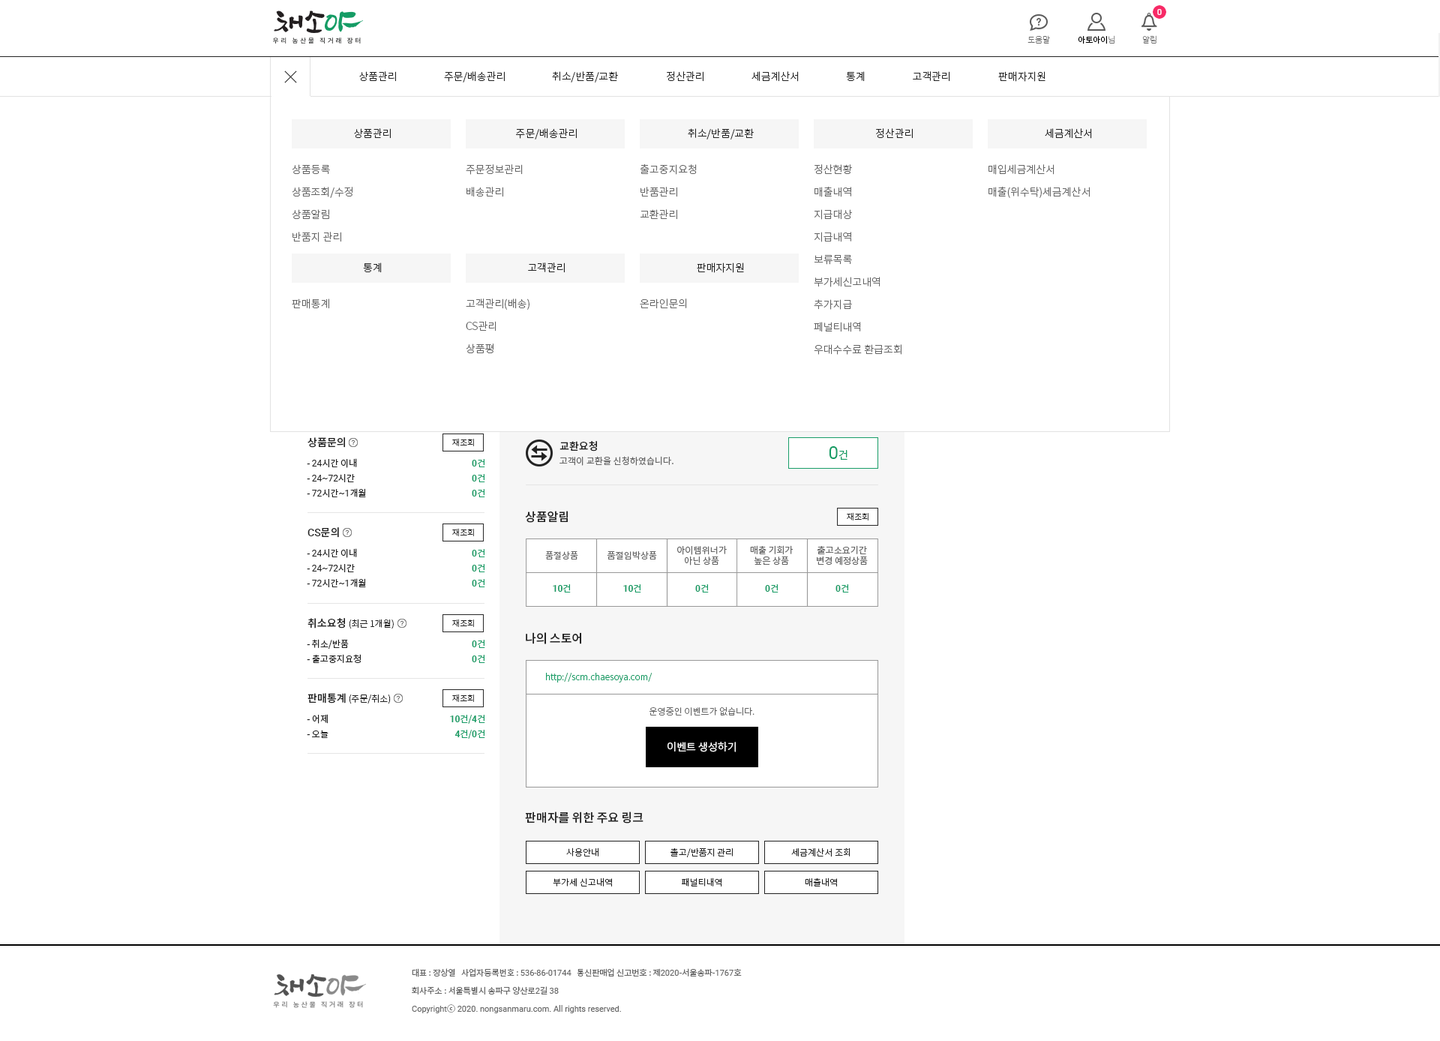
<style>
.page{position:relative;width:1440px;height:1041px;background:#ffffff}
.page>*{position:absolute;margin:0}
.t1{font:8.2px "NotoSansCJKkr-Thin";color:#666666}
.t2{font:8.2px "NotoSansCJKkr-Regular";color:#000000}
.t3{font:10.5px "NotoSansCJKkr-Light";color:#222222}
.t4{font:10.5px/22.5px "NotoSansCJKkr-Light";color:#666666}
.t5{font:10.5px "NotoSansCJKkr-Light";color:#666666}
.t6{font:10.5px "NotoSansCJKkr-Medium";color:#222222}
.t7{font:8.2px "NotoSansCJKkr-Light";color:#222222}
.t8{font:18px "Roboto-Regular";color:#159c65}
.t9{font:10.5px "NotoSansCJKkr-DemiLight";color:#159c65}
.t10{font:9px/15px "NotoSansCJKkr-Regular";color:#222222}
.t11{font:9px/15px "Roboto-Regular";color:#222222}
.t12{font:9px/15px "Roboto-Bold";color:#159c65}
.t13{font:9px/15px "NotoSansCJKkr-Regular";color:#159c65}
.t14{font:9px "NotoSansCJKkr-Regular";color:#666666}
.t15{font:12px "NotoSansCJKkr-Medium";color:#222222}
.t16{font:10.5px "Roboto-Medium";color:#222222}
.t17{font:9px "Roboto-Bold";color:#159c65}
.t18{font:9px "NotoSansCJKkr-Regular";color:#159c65}
.t19{font:9px "NotoSansCJKkr-Light";color:#222222}
.t20{font:9px "NotoSansCJKkr-Light";color:#159c65}
.t21{font:9px "NotoSansCJKkr-Light";color:#666666}
.t22{font:10.5px "NotoSansCJKkr-DemiLight";color:#ffffff}
.t23{font:8.2px/18px "Roboto-Regular";color:#666666}
.t24{font:8.2px/18px "NotoSansCJKkr-Regular";color:#666666}
</style>
<div class="page">
<p class="t1" style="left:1028px;top:35px;width:22px;height:9px">도움말</p>
<p class="t2" style="left:1078px;top:35px;width:37px;height:9px">아토아이<span class="t1">님</span></p>
<p class="t1" style="left:1142px;top:35px;width:14px;height:9px">알림</p>
<p class="t3" style="left:359px;top:71px;width:37px;height:11px">상품관리</p>
<p class="t3" style="left:444px;top:71px;width:61px;height:11px">주문/배송관리</p>
<p class="t3" style="left:552px;top:71px;width:66px;height:11px">취소/반품/교환</p>
<p class="t3" style="left:667px;top:71px;width:37px;height:11px">정산관리</p>
<p class="t3" style="left:752px;top:71px;width:47px;height:11px">세금계산서</p>
<p class="t3" style="left:846px;top:71px;width:19px;height:11px">통계</p>
<p class="t3" style="left:913px;top:71px;width:37px;height:11px">고객관리</p>
<p class="t3" style="left:998px;top:71px;width:48px;height:11px">판매자지원</p>
<p class="t3" style="left:354px;top:128px;width:37px;height:11px">상품관리</p>
<p class="t3" style="left:516px;top:128px;width:61px;height:12px">주문/배송관리</p>
<p class="t3" style="left:688px;top:128px;width:66px;height:12px">취소/반품/교환</p>
<p class="t3" style="left:876px;top:128px;width:37px;height:11px">정산관리</p>
<p class="t3" style="left:1045px;top:128px;width:47px;height:11px">세금계산서</p>
<p class="t4" style="left:292px;top:164px;width:60px;height:78px">상품등록<br>상품조회/수정<br>상품알림<br>반품지 관리</p>
<p class="t4" style="left:466px;top:164px;width:57px;height:33px">주문정보관리<br>배송관리</p>
<p class="t4" style="left:640px;top:164px;width:57px;height:56px">출고중지요청<br>반품관리<br>교환관리</p>
<p class="t4" style="left:814px;top:164px;width:88px;height:191px">정산현황<br>매출내역<br>지급대상<br>지급내역<br>보류목록<br>부가세신고내역<br>추가지급<br>페널티내역<br>우대수수료 환급조회</p>
<p class="t4" style="left:988px;top:164px;width:102px;height:34px">매입세금계산서<br>매출(위수탁)세금계산서</p>
<p class="t3" style="left:363px;top:262px;width:19px;height:11px">통계</p>
<p class="t3" style="left:528px;top:262px;width:37px;height:11px">고객관리</p>
<p class="t3" style="left:697px;top:262px;width:47px;height:11px">판매자지원</p>
<p class="t5" style="left:292px;top:298px;width:37px;height:11px">판매통계</p>
<p class="t4" style="left:466px;top:298px;width:64px;height:55px">고객관리(배송)<br>CS관리<br>상품평</p>
<p class="t5" style="left:640px;top:298px;width:47px;height:11px">온라인문의</p>
<p class="t6" style="left:308px;top:437px;width:37px;height:11px">상품문의</p>
<p class="t7" style="left:452px;top:438px;width:22px;height:8px">재조회</p>
<p class="t6" style="left:560px;top:441px;width:37px;height:11px">교환요청</p>
<p class="t8" style="left:829px;top:446px;width:19px;height:14px">0<span class="t9">건</span></p>
<p class="t10" style="left:307px;top:458px;width:59px;height:39px">- <span class="t11">24</span>시간 이내<br>- <span class="t11">24~72</span>시간<br>- <span class="t11">72</span>시간<span class="t11">~1</span>개월</p>
<p class="t12" style="left:472px;top:459px;width:13px;height:38px;text-align:right">0<span class="t13">건<br></span>0<span class="t13">건<br></span>0<span class="t13">건</span></p>
<p class="t14" style="left:560px;top:456px;width:114px;height:10px">고객이 교환을 신청하였습니다.</p>
<p class="t15" style="left:525px;top:511px;width:43px;height:12px">상품알림</p>
<p class="t7" style="left:847px;top:512px;width:21px;height:8px">재조회</p>
<p class="t16" style="left:308px;top:527px;width:31px;height:11px">CS<span class="t6">문의</span></p>
<p class="t7" style="left:452px;top:528px;width:22px;height:8px">재조회</p>
<p class="t14" style="left:677px;top:545px;width:50px;height:21px;text-align:center">아이템위너가<br>아닌 상품</p>
<p class="t14" style="left:750px;top:545px;width:43px;height:20px;text-align:center">매출 기회가<br>높은 상품</p>
<p class="t14" style="left:817px;top:545px;width:51px;height:21px;text-align:center">출고소요기간<br>변경 예정상품</p>
<p class="t10" style="left:307px;top:548px;width:59px;height:39px">- <span class="t11">24</span>시간 이내<br>- <span class="t11">24~72</span>시간<br>- <span class="t11">72</span>시간<span class="t11">~1</span>개월</p>
<p class="t12" style="left:472px;top:549px;width:13px;height:38px;text-align:right">0<span class="t13">건<br></span>0<span class="t13">건<br></span>0<span class="t13">건</span></p>
<p class="t14" style="left:545px;top:551px;width:33px;height:9px">품절상품</p>
<p class="t14" style="left:607px;top:551px;width:50px;height:9px">품절임박상품</p>
<p class="t17" style="left:553px;top:584px;width:18px;height:8px">10<span class="t18">건</span></p>
<p class="t17" style="left:623px;top:584px;width:18px;height:8px">10<span class="t18">건</span></p>
<p class="t17" style="left:695px;top:584px;width:14px;height:8px">0<span class="t18">건</span></p>
<p class="t17" style="left:765px;top:584px;width:13px;height:8px">0<span class="t18">건</span></p>
<p class="t17" style="left:836px;top:584px;width:13px;height:8px">0<span class="t18">건</span></p>
<p class="t19" style="left:308px;top:618px;width:86px;height:11px"><span class="t6">취소요청 </span>(최근 1개월)</p>
<p class="t7" style="left:452px;top:619px;width:22px;height:8px">재조회</p>
<p class="t10" style="left:307px;top:639px;width:54px;height:24px">- 취소/반품<br>- 출고중지요청</p>
<p class="t12" style="left:472px;top:640px;width:13px;height:23px;text-align:right">0<span class="t13">건<br></span>0<span class="t13">건</span></p>
<p class="t15" style="left:526px;top:632px;width:55px;height:12px">나의 스토어</p>
<p class="t20" style="left:546px;top:673px;width:106px;height:9px">http://scm.chaesoya.com/</p>
<p class="t19" style="left:308px;top:693px;width:83px;height:11px"><span class="t6">판매통계 </span>(주문/취소)</p>
<p class="t7" style="left:452px;top:694px;width:22px;height:8px">재조회</p>
<p class="t21" style="left:650px;top:706px;width:104px;height:10px">운영중인 이벤트가 없습니다.</p>
<p class="t10" style="left:307px;top:714px;width:21px;height:24px">- 어제<br>- 오늘</p>
<p class="t12" style="left:450px;top:715px;width:35px;height:24px;text-align:right">10<span class="t13">건/</span>4<span class="t13">건<br></span>4<span class="t13">건/</span>0<span class="t13">건</span></p>
<p class="t22" style="left:668px;top:742px;width:68px;height:10px">이벤트 생성하기</p>
<p class="t15" style="left:525px;top:812px;width:119px;height:12px">판매자를 위한 주요 링크</p>
<p class="t19" style="left:566px;top:848px;width:32px;height:8px">사용안내</p>
<p class="t19" style="left:670px;top:848px;width:63px;height:9px">촐고/반품지 관리</p>
<p class="t19" style="left:791px;top:848px;width:59px;height:9px">세금계산서 조회</p>
<p class="t19" style="left:553px;top:878px;width:59px;height:8px">부가세 신고내역</p>
<p class="t19" style="left:682px;top:878px;width:40px;height:8px">패널티내역</p>
<p class="t19" style="left:805px;top:878px;width:32px;height:8px">매출내역</p>
<p class="t23" style="left:412px;top:968px;width:330px;height:45px"><span class="t24">대표 : 장상열   사업자등록번호 : </span>536-86-01744<span class="t24">   통신판매업 신고번호 : 제</span>2020<span class="t24">-서울송파-</span>1767<span class="t24">호<br>회사주소 : 서울특별시 송파구 양산로</span>2<span class="t24">길 </span>38<br>Copyright<span class="t24">ⓒ</span> 2020. nongsanmaru.com. All rights reserved.</p>
</div>
